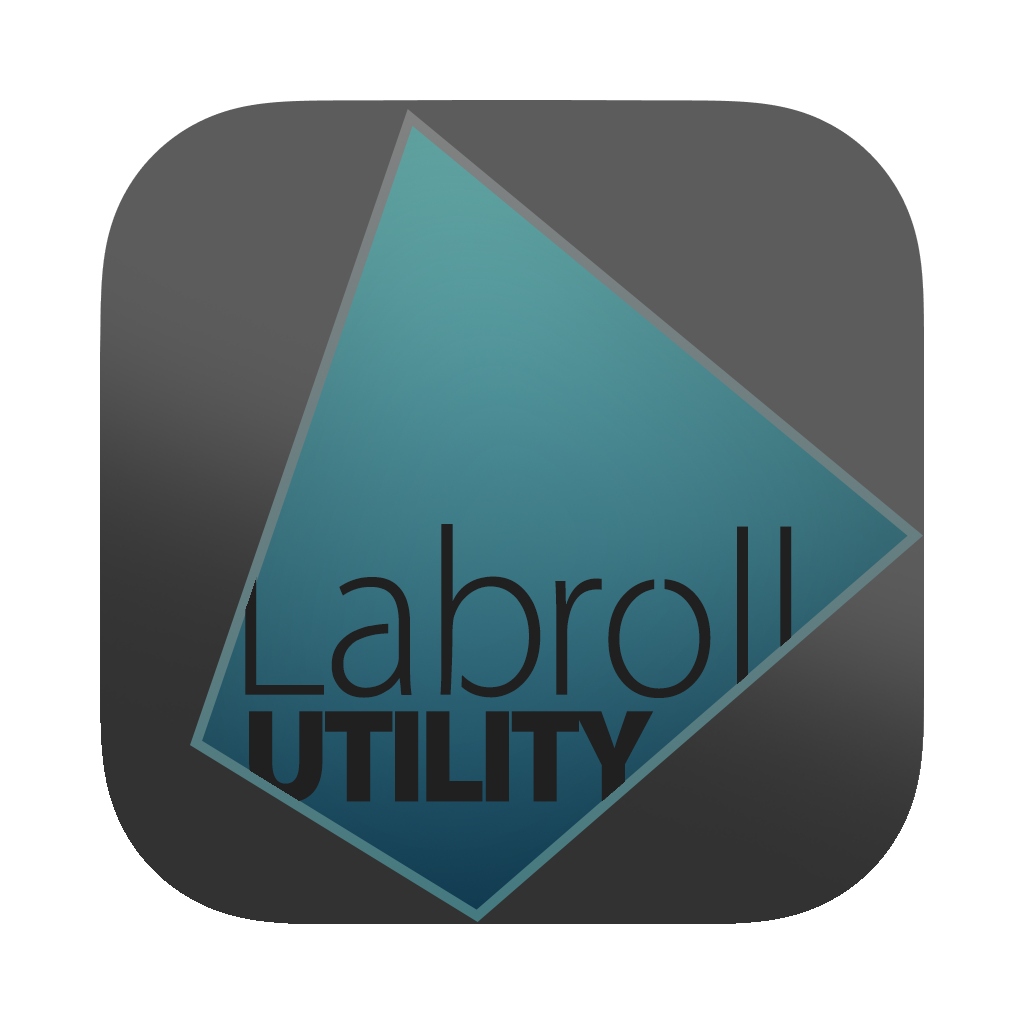
<style>
.page{position:relative;width:1024px;height:1024px;background:#ffffff}
.page>*{position:absolute;margin:0}
.t1{font:236.5px/106.7px "Cleanvertising-Light";letter-spacing:-0.02em;color:#202020;scale:0.95 1}
.t2{font:15.6px/106.7px "Cleanvertising-Light";color:#202020;scale:0.95 1}
.t3{font:133.3px/106.7px "Cleanvertising-Black";letter-spacing:-0.06em;color:#202020;scale:0.95 1}
</style>
<div class="page">
<p class="t1" style="left:245px;top:524px;width:547px;height:279px"><span class="t2"> </span>Labroll<br><span class="t3"> UTILITY</span></p>
</div>
